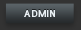
<style>
.page{position:relative;width:81px;height:30px}
.page>*{position:absolute;margin:0}
.t1{font:11px "Delicious-Bold";letter-spacing:-0.025em;color:#e8eff3;scale:1.14 1}
</style>
<div class="page">
<p class="t1" style="left:24px;top:10px;width:31px;height:7px">ADMIN</p>
</div>
